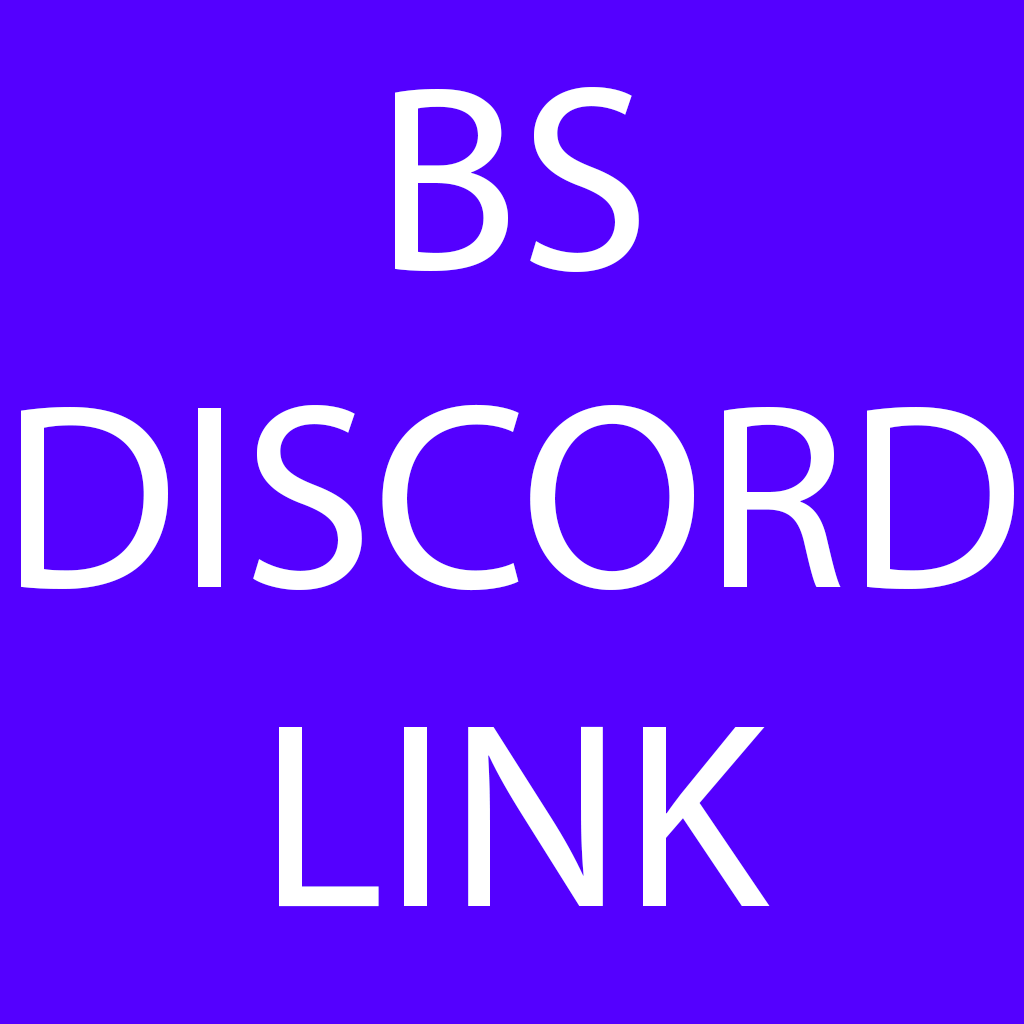
<style>
.page{position:relative;width:1024px;height:1024px;background:#5400ff}
.page>*{position:absolute;margin:0}
.t1{font:265.6px "MyriadPro-Regular";color:#ffffff}
</style>
<div class="page">
<p class="t1" style="left:21px;top:87px;width:993px;height:820px;text-align:center">BS<br>DISCORD<br>LINK</p>
</div>
